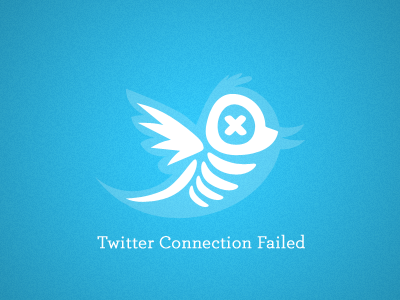
<style>
.page{position:relative;width:400px;height:300px}
.page>*{position:absolute;margin:0}
.t1{font:18px "ArcherPro-Book";color:#ffffff;font-weight:bold}
</style>
<div class="page">
<p class="t1" style="left:97px;top:234px;width:208px;height:15px">Twitter Connection Failed</p>
</div>
